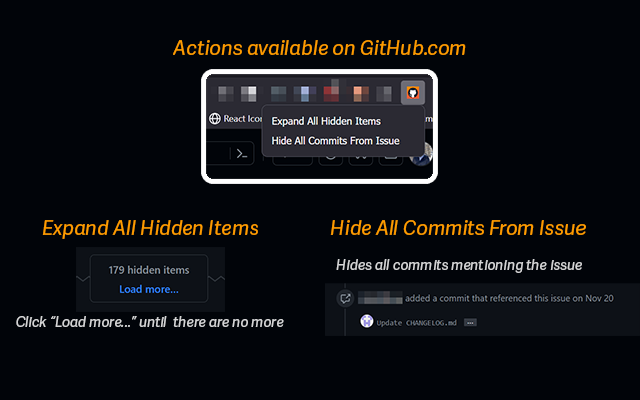
<style>
.page{position:relative;width:640px;height:400px;background:#010409}
.page>*{position:absolute;margin:0}
.t1{font:20px "AdelleSans-Italic";color:#ff9c00}
.t2{font:14px "AdelleSans-Italic";color:#d5d5d6}
</style>
<div class="page">
<p class="t1" style="left:173px;top:40px;width:293px;height:15px">Actions available on GitHub.com</p>
<p class="t1" style="left:42px;top:220px;width:216px;height:19px">Expand All Hidden Items</p>
<p class="t1" style="left:330px;top:220px;width:256px;height:15px">Hide All Commits From Issue</p>
<p class="t2" style="left:336px;top:259px;width:246px;height:14px">Hides all commits mentioning the issue</p>
<p class="t2" style="left:16px;top:316px;width:268px;height:11px">Click “Load more...” until  there are no more</p>
</div>
